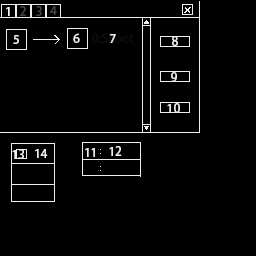
<style>
.page{position:relative;width:256px;height:256px;background:#000000}
.page>*{position:absolute;margin:0}
.t1{font:12px "AdobeHeitiStd-Regular";color:#454545}
.t2{font:12px "AdobeHeitiStd-Regular";color:#f6f6f6}
.t3{font:12px "AdobeHeitiStd-Regular";color:#ededed}
</style>
<div class="page">
<p class="t1" style="left:20px;top:6px;width:6px;height:10px">2</p>
<p class="t1" style="left:36px;top:6px;width:6px;height:10px">3</p>
<p class="t1" style="left:50px;top:6px;width:7px;height:9px">4</p>
<p class="t2" style="left:6px;top:7px;width:4px;height:9px">1</p>
<p class="t3" style="left:13px;top:35px;width:6px;height:9px">5</p>
<p class="t3" style="left:73px;top:33px;width:7px;height:10px">6</p>
<p class="t3" style="left:110px;top:34px;width:6px;height:9px">7</p>
<p class="t3" style="left:172px;top:36px;width:6px;height:10px">8</p>
<p class="t3" style="left:171px;top:72px;width:6px;height:10px">9</p>
<p class="t3" style="left:167px;top:103px;width:13px;height:10px">10</p>
<p class="t3" style="left:12px;top:149px;width:12px;height:10px">13</p>
<p class="t3" style="left:35px;top:149px;width:13px;height:9px">14</p>
<p class="t3" style="left:85px;top:148px;width:10px;height:9px">11</p>
<p class="t3" style="left:109px;top:146px;width:13px;height:10px">12</p>
</div>
